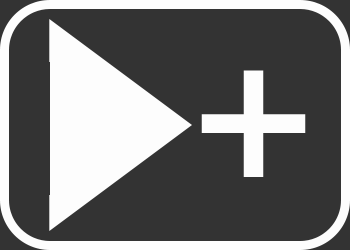
<style>
.page{position:relative;width:350px;height:250px;background:#333333}
.page>*{position:absolute;margin:0}
.t1{font:200px "MyriadPro-Bold";color:#fdfdfd}
</style>
<div class="page">
<p class="t1" style="left:201px;top:70px;width:105px;height:107px">+</p>
</div>
